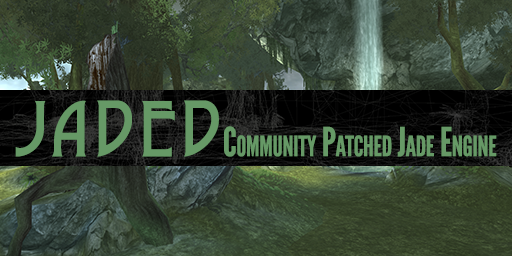
<style>
.page{position:relative;width:512px;height:256px}
.page>*{position:absolute;margin:0}
.t1{font:72px "DyerArtsandCrafts";letter-spacing:0.05em;color:#669966;font-variant:small-caps}
.t2{font:40px "LeagueGothic-Regular";letter-spacing:-0.01em;color:#669966;font-variant:small-caps}
</style>
<div class="page">
<p class="t1" style="left:15px;top:100px;width:204px;height:57px">JADED</p>
<p class="t2" style="left:224px;top:126px;width:273px;height:31px">Community Patched Jade Engine</p>
</div>
